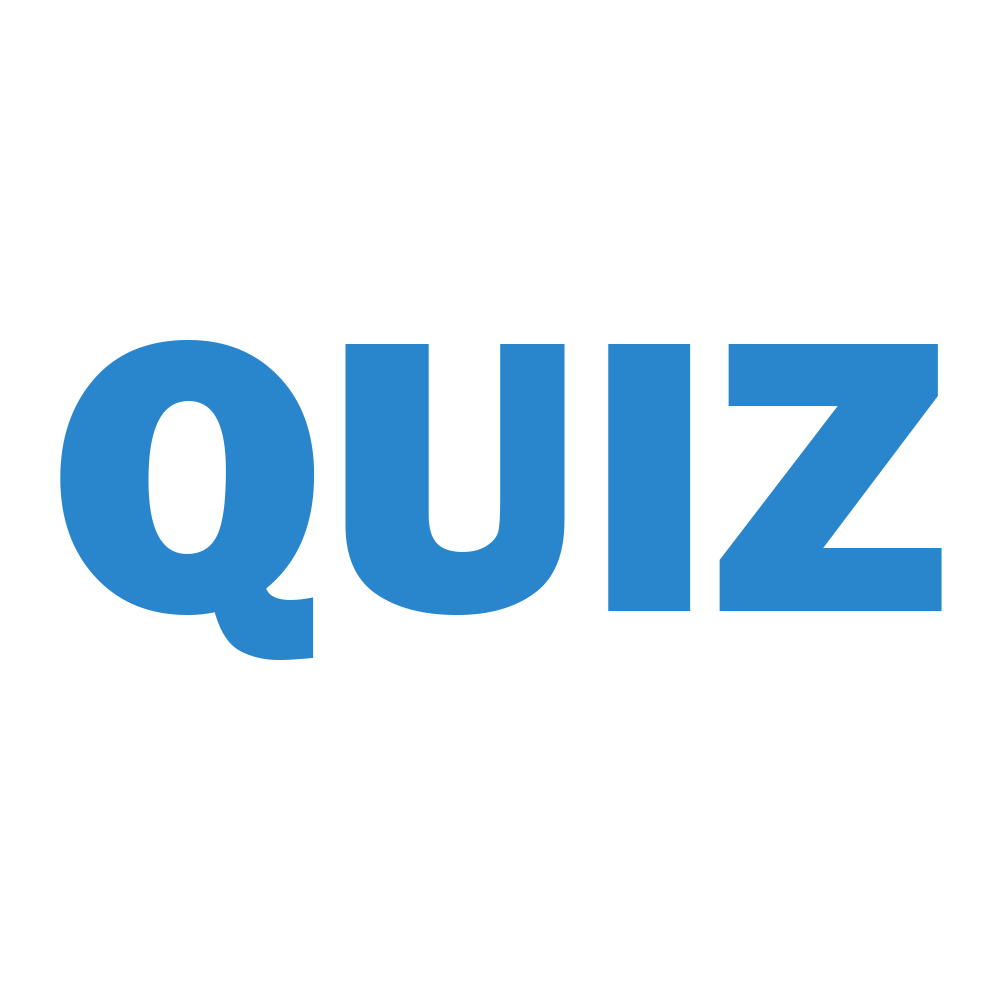
<style>
.page{position:relative;width:1000px;height:1000px;background:#ffffff}
.page>*{position:absolute;margin:0}
.t1{font:400px "FranklinGothic-Heavy";color:#2986cc}
</style>
<div class="page">
<p class="t1" style="left:60px;top:340px;width:882px;height:320px">QUIZ</p>
</div>
